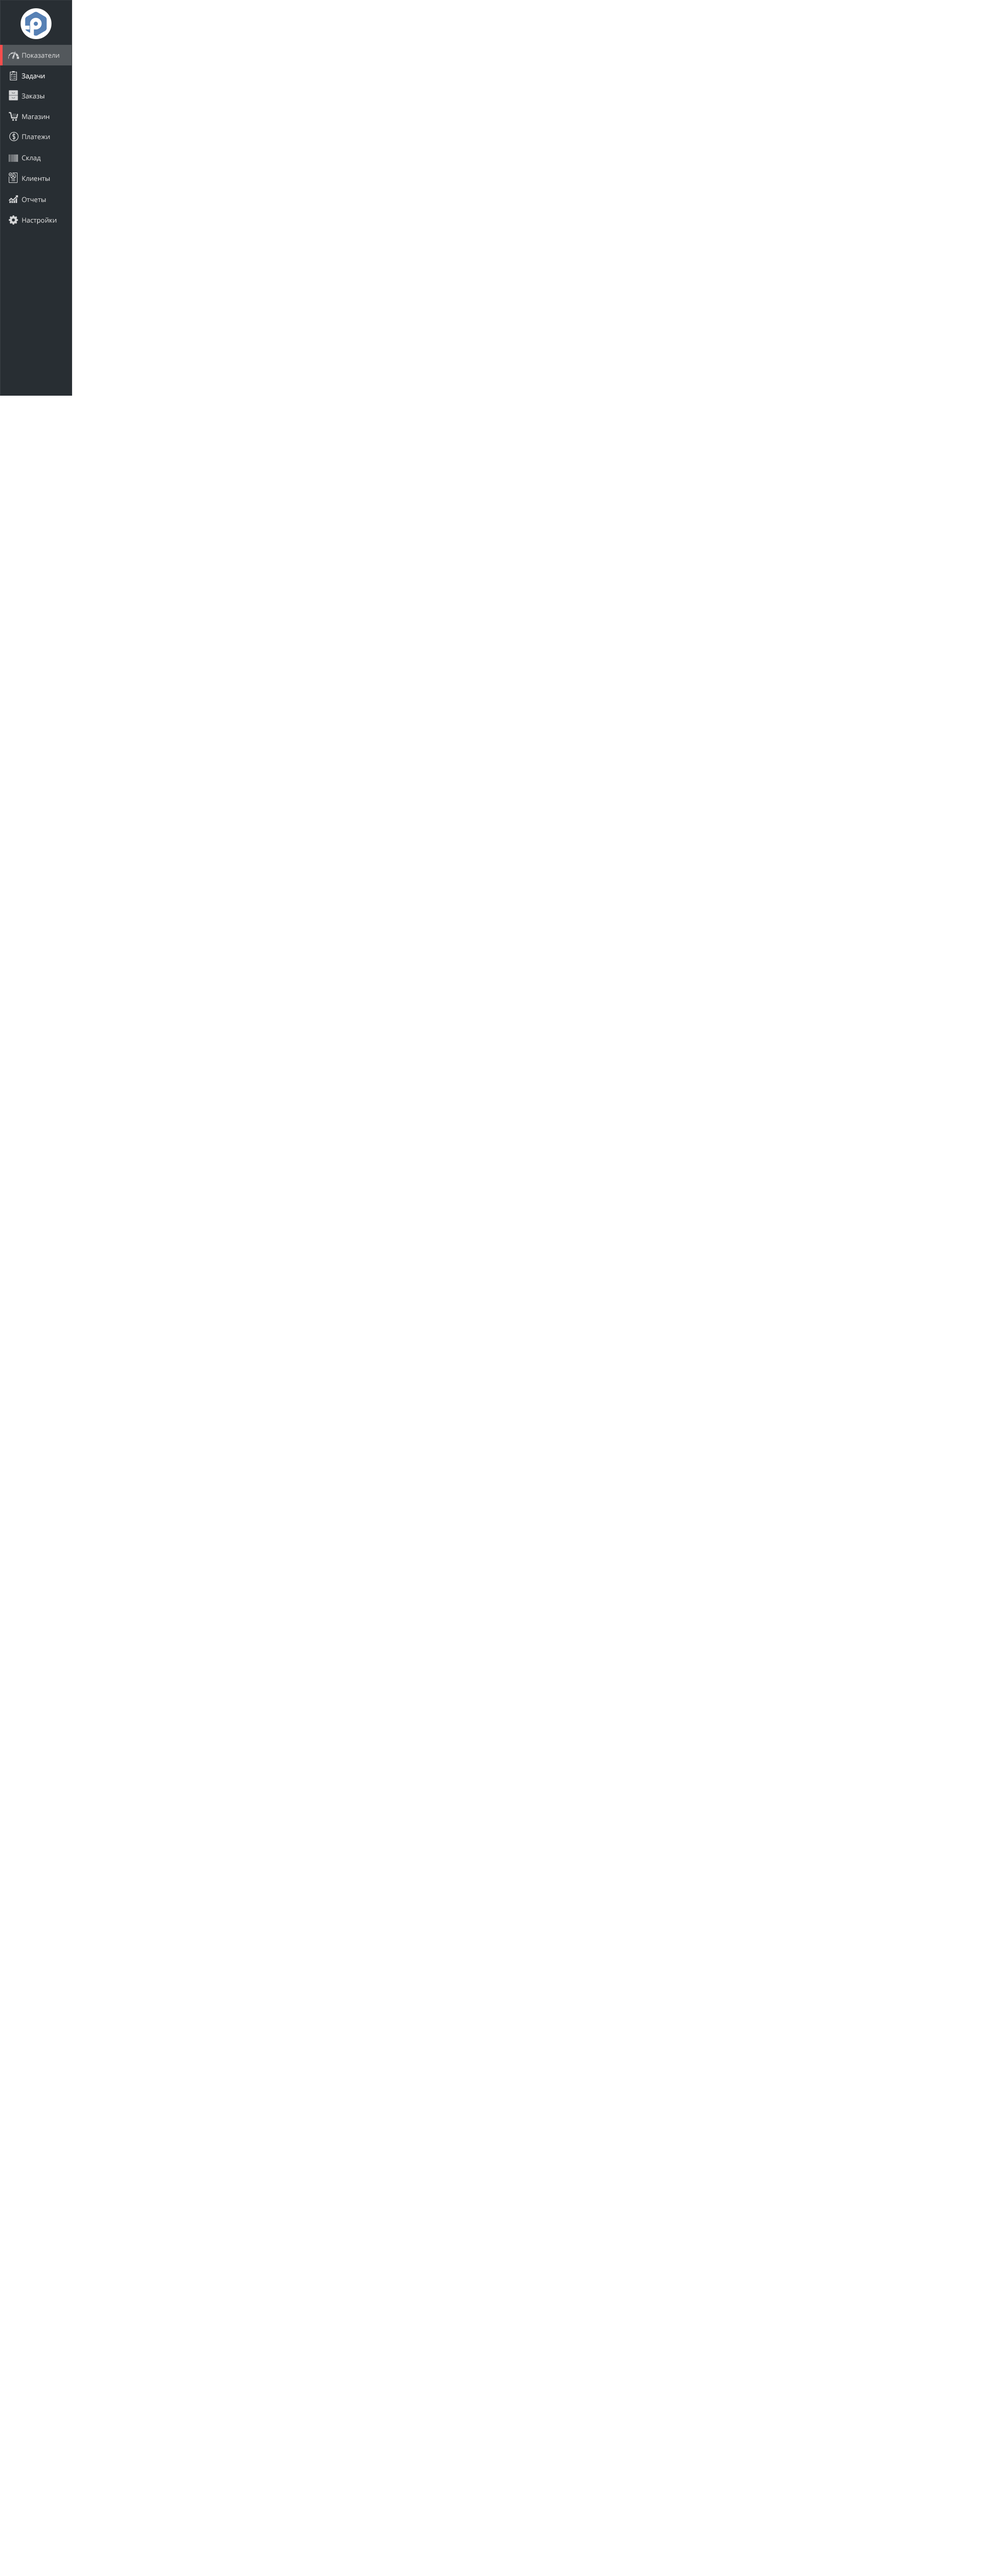
<style>
.page{position:relative;width:989px;height:2576px;background:#ffffff}
.page>*{position:absolute;margin:0}
.t1{font:6.7px "OpenSans-Regular";color:#d4d5d6}
.t2{font:6.7px "OpenSans-Regular";color:#ffffff}
</style>
<div class="page">
<p class="t1" style="left:22px;top:53px;width:37px;height:5px">Показатели</p>
<p class="t2" style="left:22px;top:73px;width:23px;height:7px">Задачи</p>
<p class="t1" style="left:22px;top:93px;width:22px;height:6px">Заказы</p>
<p class="t1" style="left:22px;top:114px;width:27px;height:6px">Магазин</p>
<p class="t1" style="left:22px;top:134px;width:28px;height:6px">Платежи</p>
<p class="t1" style="left:22px;top:155px;width:19px;height:7px">Склад</p>
<p class="t1" style="left:22px;top:176px;width:28px;height:5px">Клиенты</p>
<p class="t1" style="left:22px;top:197px;width:24px;height:5px">Отчеты</p>
<p class="t1" style="left:22px;top:217px;width:35px;height:7px">Настройки</p>
</div>
